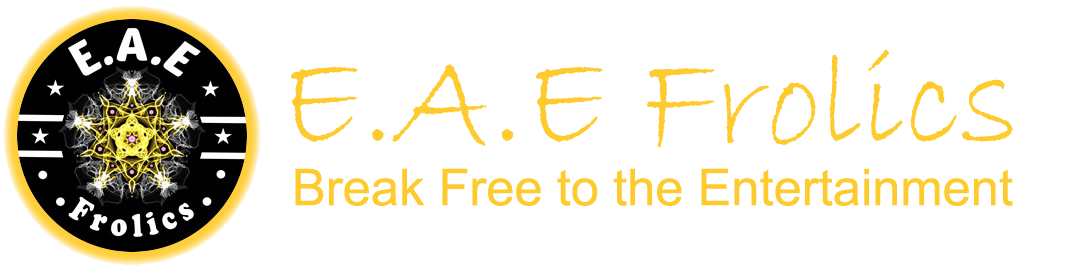
<style>
.page{position:relative;width:1088px;height:269px;background:#ffffff}
.page>*{position:absolute;margin:0}
.t1{font:136px "BradleyHandITC";color:#fecb2e}
.t2{font:50.7px "ArialMT";color:#fecb2e}
</style>
<div class="page">
<p class="t1" style="left:291px;top:49px;width:722px;height:99px">E.A.E Frolics</p>
<p class="t2" style="left:295px;top:168px;width:718px;height:38px">Break Free to the Entertainment</p>
</div>
